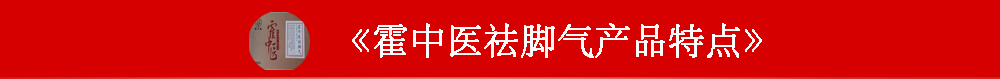
<style>
.page{position:relative;width:1000px;height:79px;background:#d60000}
.page>*{position:absolute;margin:0}
.t1{font:36px "STSong";color:#fbfbfb;font-weight:bold}
</style>
<div class="page">
<p class="t1" style="left:352px;top:23px;width:410px;height:35px">《霍中医祛脚气产品特点》</p>
</div>
